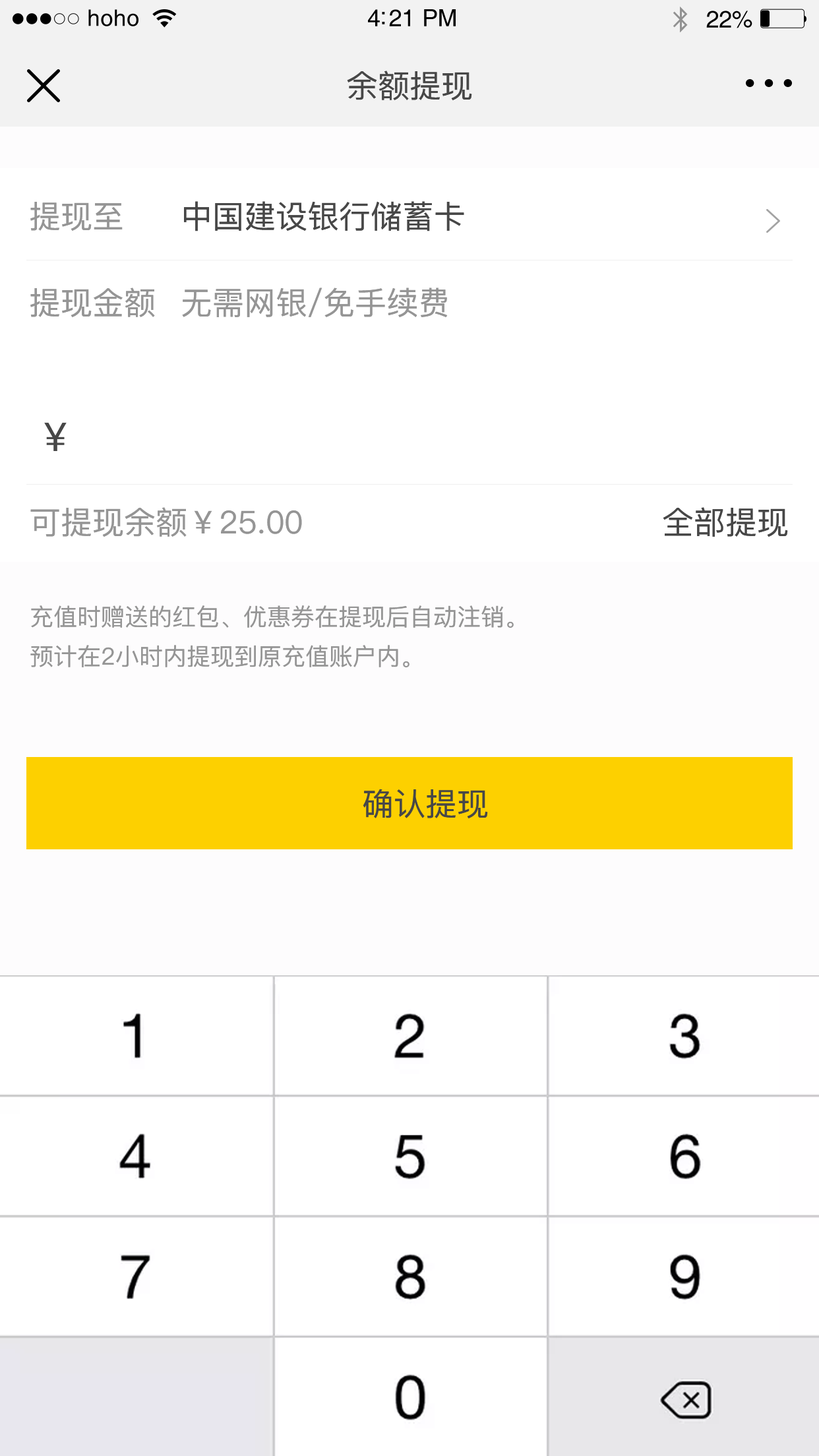
<style>
.page{position:relative;width:819px;height:1456px;background:#ffffff}
.page>*{position:absolute;margin:0}
.t1{font:22.8px "Helvetica";letter-spacing:0.02em;color:#000000}
.t2{font:23.8px "Helvetica";letter-spacing:-0.02em;color:#000000}
.t3{font:31.7px "PingFang-SC-Medium";color:#474747}
.t4{font:31.7px "PingFang-SC-Medium";color:#959595}
.t5{font:39.6px "PingFang-SC-Medium";color:#474747}
.t6{font:23.7px "PingFang-SC-Medium";color:#959595}
</style>
<div class="page">
<p class="t1" style="left:88px;top:9px;width:50px;height:17px">hoho</p>
<p class="t2" style="left:368px;top:9px;width:88px;height:17px">4:21 PM</p>
<p class="t2" style="left:706px;top:11px;width:46px;height:17px">22%</p>
<p class="t3" style="left:347px;top:71px;width:125px;height:29px">余额提现</p>
<p class="t4" style="left:30px;top:202px;width:93px;height:29px">提现至</p>
<p class="t3" style="left:184px;top:201px;width:280px;height:30px">中国建设银行储蓄卡</p>
<p class="t4" style="left:30px;top:288px;width:125px;height:29px">提现金额</p>
<p class="t4" style="left:182px;top:288px;width:266px;height:29px">无需网银/免手续费</p>
<p class="t5" style="left:44px;top:423px;width:23px;height:28px">￥</p>
<p class="t4" style="left:30px;top:507px;width:272px;height:30px">可提现余额￥25.00</p>
<p class="t3" style="left:663px;top:507px;width:125px;height:30px">全部提现</p>
<p class="t6" style="left:31px;top:605px;width:483px;height:23px">充值时赠送的红包、优惠券在提现后自动注销。</p>
<p class="t6" style="left:30px;top:645px;width:379px;height:22px">预计在2小时内提现到原充值账户内。</p>
<p class="t3" style="left:363px;top:789px;width:125px;height:29px">确认提现</p>
</div>
